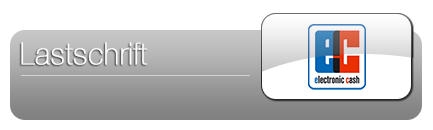
<style>
.page{position:relative;width:433px;height:130px;background:#ffffff}
.page>*{position:absolute;margin:0}
.t1{font:30px "HelveticaNeue-UltraLight";color:#ffffff;font-weight:bold}
</style>
<div class="page">
<p class="t1" style="left:21px;top:42px;width:126px;height:23px">Lastschrift</p>
</div>
